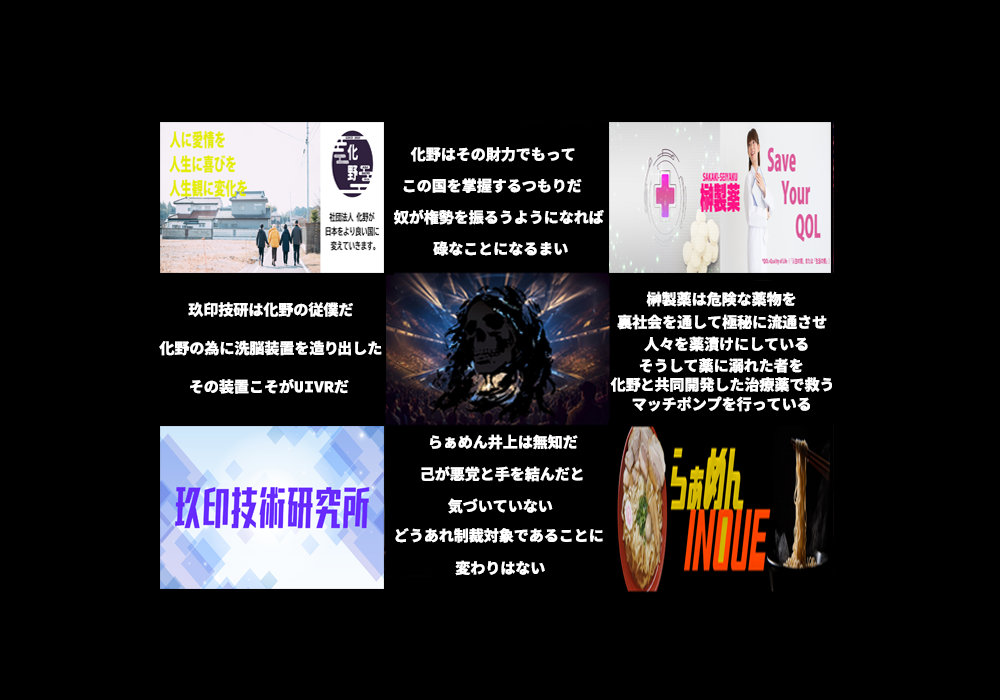
<style>
.page{position:relative;width:1000px;height:700px;background:#000000}
.page>*{position:absolute;margin:0}
.t1{font:15px "SourceHanCodeJP-Heavy";color:#ffffff}
</style>
<div class="page">
<p class="t1" style="left:410px;top:147px;width:165px;height:15px">化野はその財力でもって</p>
<p class="t1" style="left:403px;top:178px;width:179px;height:15px">この国を掌握するつもりだ</p>
<p class="t1" style="left:394px;top:209px;width:210px;height:16px">奴が権勢を振るうようになれば</p>
<p class="t1" style="left:433px;top:241px;width:135px;height:15px">碌なことになるまい</p>
<p class="t1" style="left:646px;top:291px;width:150px;height:16px">榊製薬は危険な薬物を</p>
<p class="t1" style="left:188px;top:302px;width:165px;height:15px">玖印技研は化野の従僕だ</p>
<p class="t1" style="left:617px;top:314px;width:210px;height:16px">裏社会を通して極秘に流通させ</p>
<p class="t1" style="left:159px;top:340px;width:223px;height:16px">化野の為に洗脳装置を造り出した</p>
<p class="t1" style="left:644px;top:336px;width:164px;height:16px">人々を薬漬けにしている</p>
<p class="t1" style="left:639px;top:358px;width:164px;height:15px">そうして薬に溺れた者を</p>
<p class="t1" style="left:610px;top:377px;width:222px;height:15px">化野と共同開発した治療薬で救う</p>
<p class="t1" style="left:190px;top:379px;width:159px;height:15px">その装置こそがUIVRだ</p>
<p class="t1" style="left:632px;top:396px;width:178px;height:16px">マッチポンプを行っている</p>
<p class="t1" style="left:429px;top:434px;width:149px;height:16px">らぁめん井上は無知だ</p>
<p class="t1" style="left:421px;top:466px;width:162px;height:16px">己が悪党と手を結んだと</p>
<p class="t1" style="left:448px;top:498px;width:105px;height:16px">気づいていない</p>
<p class="t1" style="left:395px;top:528px;width:208px;height:15px">どうあれ制裁対象であることに</p>
<p class="t1" style="left:455px;top:560px;width:90px;height:16px">変わりはない</p>
</div>
